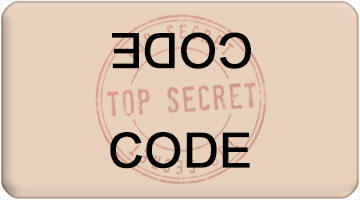
<style>
.page{position:relative;width:360px;height:200px;background:#e8d0bb}
.page>*{position:absolute;margin:0}
.t1{font:48px "ArialMT";color:#000000;font-weight:bold}
</style>
<div class="page">
<p class="t1" style="left:112px;top:32px;width:139px;height:37px;rotate:180deg">CODE</p>
<p class="t1" style="left:110px;top:132px;width:140px;height:37px">CODE</p>
</div>
